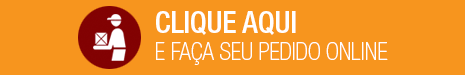
<style>
.page{position:relative;width:465px;height:75px;background:#f7951e}
.page>*{position:absolute;margin:0}
.t1{font:23.9px/26.9px "HelveticaNeueLTStd-ThCn";color:#ffffff}
.t2{font:30px/26.9px "HelveticaNeueLTStd-MdCn";color:#ffffff}
</style>
<div class="page">
<p class="t1" style="left:156px;top:11px;width:232px;height:54px;text-align:justify"><span class="t2">CLIQUE AQUI<br></span>E FAÇA SEU PEDIDO ONLINE</p>
</div>
